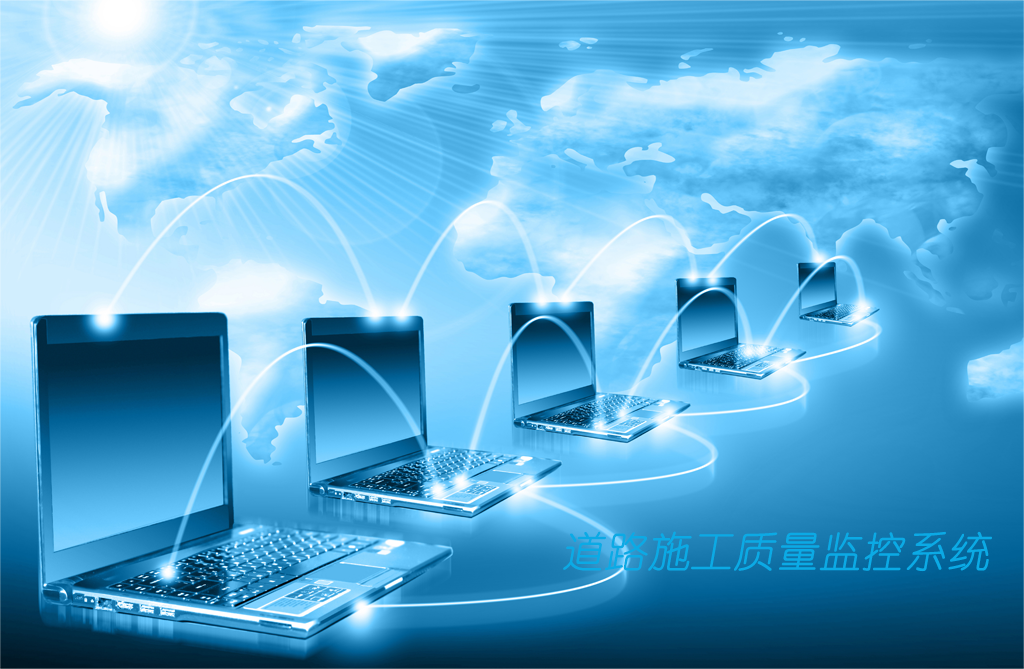
<style>
.page{position:relative;width:1024px;height:669px}
.page>*{position:absolute;margin:0}
.t1{font:41.7px "YouYuan";color:#0baae5;font-weight:bold;font-style:italic}
</style>
<div class="page">
<p class="t1" style="left:563px;top:531px;width:429px;height:41px">道路施工质量监控系统</p>
</div>
